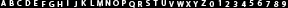
<style>
.page{position:relative;width:288px;height:8px;background:#000000}
.page>*{position:absolute;margin:0}
.t1{font:8px "MyriadPro-Regular";color:#ffffff}
</style>
<div class="page">
<p class="t1" style="left:1px;top:0px;width:37px;height:6px">A  B  C  D  E</p>
<p class="t1" style="left:42px;top:1px;width:13px;height:6px">F  G</p>
<p class="t1" style="left:57px;top:1px;width:20px;height:6px">H       J</p>
<p class="t1" style="left:67px;top:0px;width:2px;height:6px">I</p>
<p class="t1" style="left:81px;top:0px;width:5px;height:6px">K</p>
<p class="t1" style="left:90px;top:0px;width:5px;height:6px">L</p>
<p class="t1" style="left:97px;top:0px;width:6px;height:7px">M</p>
<p class="t1" style="left:105px;top:0px;width:6px;height:6px">N</p>
<p class="t1" style="left:113px;top:0px;width:6px;height:6px">O</p>
<p class="t1" style="left:122px;top:0px;width:4px;height:6px">P</p>
<p class="t1" style="left:129px;top:1px;width:6px;height:7px">Q</p>
<p class="t1" style="left:138px;top:1px;width:5px;height:6px">R</p>
<p class="t1" style="left:146px;top:0px;width:4px;height:6px">S</p>
<p class="t1" style="left:153px;top:0px;width:5px;height:6px">T</p>
<p class="t1" style="left:161px;top:0px;width:5px;height:6px">U</p>
<p class="t1" style="left:169px;top:1px;width:5px;height:6px">V</p>
<p class="t1" style="left:177px;top:1px;width:7px;height:6px">W</p>
<p class="t1" style="left:186px;top:1px;width:5px;height:6px">X</p>
<p class="t1" style="left:193px;top:1px;width:5px;height:6px">Y</p>
<p class="t1" style="left:201px;top:0px;width:5px;height:6px">Z</p>
<p class="t1" style="left:209px;top:1px;width:5px;height:6px">0</p>
<p class="t1" style="left:218px;top:0px;width:3px;height:6px">1</p>
<p class="t1" style="left:225px;top:1px;width:5px;height:6px">2</p>
<p class="t1" style="left:233px;top:1px;width:5px;height:6px">3</p>
<p class="t1" style="left:241px;top:1px;width:5px;height:6px">4</p>
<p class="t1" style="left:249px;top:0px;width:5px;height:6px">5</p>
<p class="t1" style="left:257px;top:0px;width:5px;height:6px">6</p>
<p class="t1" style="left:266px;top:1px;width:4px;height:6px">7</p>
<p class="t1" style="left:274px;top:1px;width:5px;height:6px">8</p>
<p class="t1" style="left:282px;top:1px;width:4px;height:6px">9</p>
</div>
